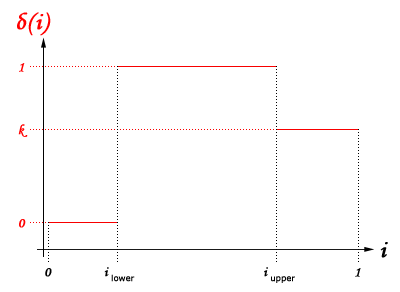
<style>
.page{position:relative;width:400px;height:292px;background:#ffffff}
.page>*{position:absolute;margin:0}
.t1{font:24px "MonotypeCorsiva";letter-spacing:0.05em;color:#ff0000;font-weight:bold}
.t2{font:14px "MonotypeCorsiva";color:#ff0000;font-weight:bold}
.t3{font:24px "MonotypeCorsiva";letter-spacing:0.01em;color:#000000;font-weight:bold}
.t4{font:14px "MonotypeCorsiva";color:#000000;font-weight:bold}
.t5{font:14px "Verdana";color:#000000;font-weight:bold}
</style>
<div class="page">
<p class="t1" style="left:17px;top:12px;width:34px;height:24px">δ(i)</p>
<p class="t2" style="left:19px;top:63px;width:6px;height:9px">1</p>
<p class="t2" style="left:18px;top:124px;width:10px;height:13px">k</p>
<p class="t2" style="left:19px;top:219px;width:7px;height:9px">0</p>
<p class="t3" style="left:380px;top:242px;width:8px;height:16px">i</p>
<p class="t4" style="left:45px;top:268px;width:7px;height:9px">0</p>
<p class="t5" style="left:104px;top:267px;width:31px;height:15px"><span class="t4">i </span>lower</p>
<p class="t5" style="left:264px;top:267px;width:31px;height:16px"><span class="t4">i </span>upper</p>
<p class="t4" style="left:355px;top:268px;width:6px;height:9px">1</p>
</div>
